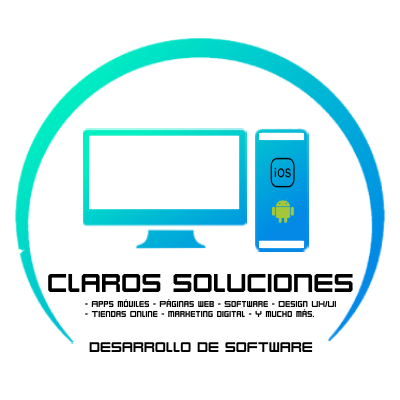
<style>
.page{position:relative;width:400px;height:400px;background:#ffffff}
.page>*{position:absolute;margin:0}
.t1{font:24px "Karnivore";color:#000000}
.t2{font:8px "Karnivore";color:#000000}
.t3{font:13px "Karnivore";color:#000000}
</style>
<div class="page">
<p class="t1" style="left:48px;top:273px;width:305px;height:20px">CLAROS SOLUCIONES</p>
<p class="t2" style="left:85px;top:299px;width:251px;height:19px">- Apps móviles - Páginas web - Software - Design UX/UI <br>- Tiendas Online - Marketing digital - Y mucho más.</p>
<p class="t3" style="left:89px;top:342px;width:224px;height:10px">DESARROLLO DE SOFTWARE</p>
</div>
